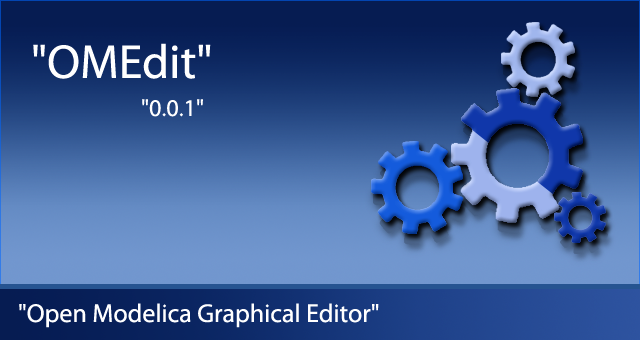
<style>
.page{position:relative;width:640px;height:340px}
.page>*{position:absolute;margin:0}
.t1{font:48px "MyriadPro-Regular";color:#ffffff}
.t2{font:24px "MyriadPro-Regular";color:#ffffff}
.t3{font:26px "MyriadPro-Regular";color:#ffffff}
</style>
<div class="page">
<p class="t1" style="left:33px;top:43px;width:178px;height:36px">"OMEdit"</p>
<p class="t2" style="left:142px;top:99px;width:61px;height:18px">"0.0.1"</p>
<p class="t3" style="left:19px;top:303px;width:360px;height:25px">"Open Modelica Graphical Editor"</p>
</div>
